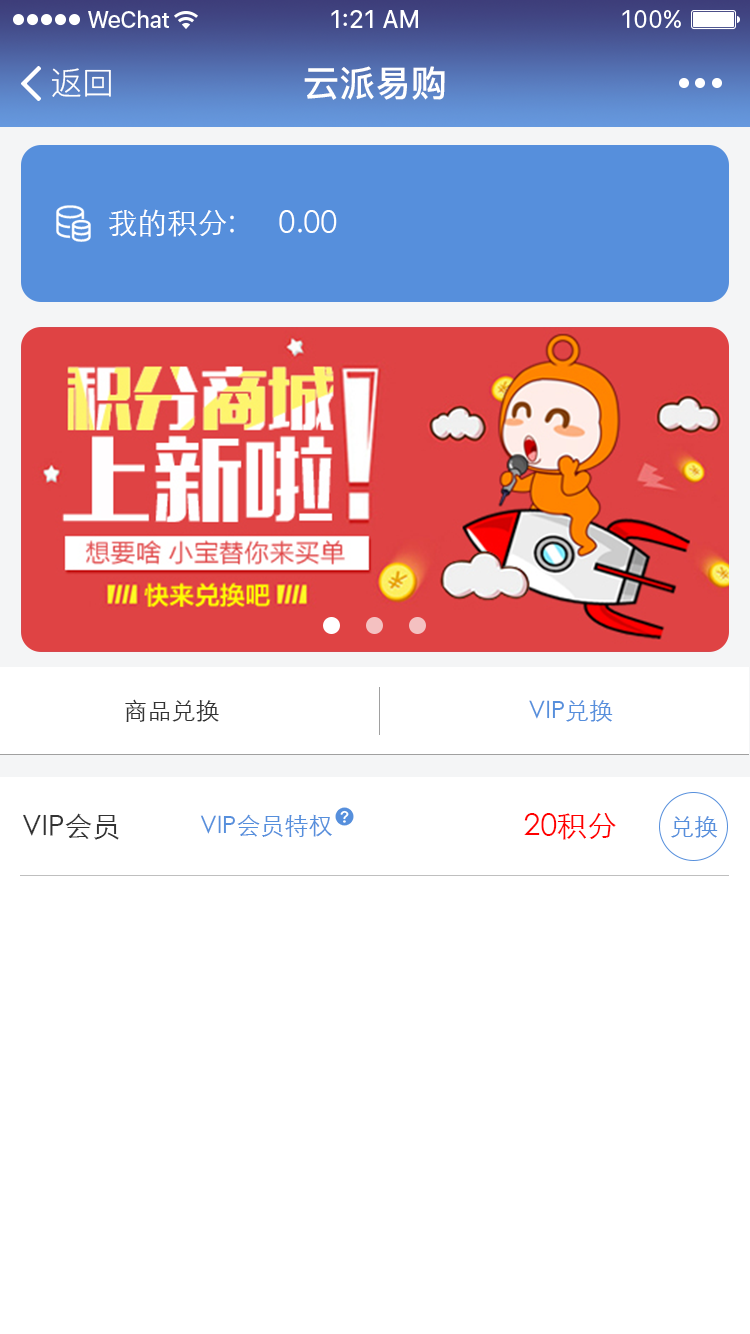
<style>
.page{position:relative;width:750px;height:1334px;background:#ffffff}
.page>*{position:absolute;margin:0}
.t1{font:32px "PingFang-SC-Regular";color:#ffffff}
.t2{font:36px "PingFang-SC-Bold";color:#ffffff}
.t3{font:30px "STXihei";color:#ffffff}
.t4{font:24px "STXihei";color:#333333}
.t5{font:24px "STXihei";color:#568fdc}
.t6{font:28px "STXihei";color:#333333}
.t7{font:30px "STXihei";color:#ff0000}
</style>
<div class="page">
<p class="t1" style="left:52px;top:68px;width:59px;height:29px">返回</p>
<p class="t2" style="left:304px;top:66px;width:141px;height:34px">云派易购</p>
<p class="t3" style="left:109px;top:209px;width:125px;height:28px">我的积分:</p>
<p class="t3" style="left:279px;top:210px;width:58px;height:23px">0.00</p>
<p class="t4" style="left:125px;top:699px;width:94px;height:23px">商品兑换</p>
<p class="t5" style="left:529px;top:700px;width:84px;height:22px">VIP兑换</p>
<p class="t6" style="left:23px;top:813px;width:96px;height:27px">VIP会员</p>
<p class="t5" style="left:200px;top:814px;width:132px;height:23px">VIP会员特权</p>
<p class="t7" style="left:524px;top:813px;width:92px;height:27px">20积分</p>
<p class="t5" style="left:671px;top:816px;width:47px;height:22px">兑换</p>
</div>
